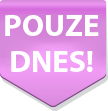
<style>
.page{position:relative;width:108px;height:111px;background:#ffffff}
.page>*{position:absolute;margin:0}
.t1{font:31px/36px "MyriadPro-Bold";color:#ffffff}
</style>
<div class="page">
<p class="t1" style="left:5px;top:15px;width:94px;height:57px;text-align:center">POUZE <br>DNES!</p>
</div>
